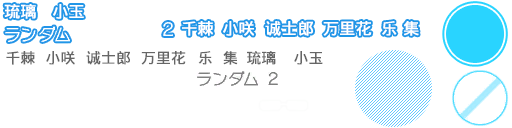
<style>
.page{position:relative;width:512px;height:128px;background:#ffffff}
.page>*{position:absolute;margin:0}
.t1{font:16px "WenQuanYiMicroHeiMono";color:#ffffff;font-weight:bold}
.t2{font:14.7px "WenQuanYiMicroHeiMono";color:#666666;font-weight:bold}
</style>
<div class="page">
<p class="t1" style="left:4px;top:4px;width:32px;height:15px">琉璃</p>
<p class="t1" style="left:53px;top:4px;width:31px;height:15px">小玉</p>
<p class="t1" style="left:182px;top:21px;width:31px;height:15px">千棘</p>
<p class="t1" style="left:223px;top:21px;width:31px;height:15px">小咲</p>
<p class="t1" style="left:265px;top:21px;width:48px;height:15px">诚士郎</p>
<p class="t1" style="left:323px;top:21px;width:49px;height:15px">万里花</p>
<p class="t1" style="left:382px;top:21px;width:15px;height:15px">乐</p>
<p class="t1" style="left:404px;top:21px;width:15px;height:15px">集</p>
<p class="t2" style="left:6px;top:51px;width:29px;height:14px">千棘</p>
<p class="t2" style="left:46px;top:51px;width:29px;height:14px">小咲</p>
<p class="t2" style="left:86px;top:51px;width:44px;height:14px">诚士郎</p>
<p class="t2" style="left:141px;top:51px;width:45px;height:14px">万里花</p>
<p class="t2" style="left:198px;top:51px;width:14px;height:14px">乐</p>
<p class="t2" style="left:223px;top:51px;width:15px;height:14px">集</p>
<p class="t2" style="left:247px;top:51px;width:29px;height:14px">琉璃</p>
<p class="t2" style="left:294px;top:51px;width:29px;height:14px">小玉</p>
</div>
